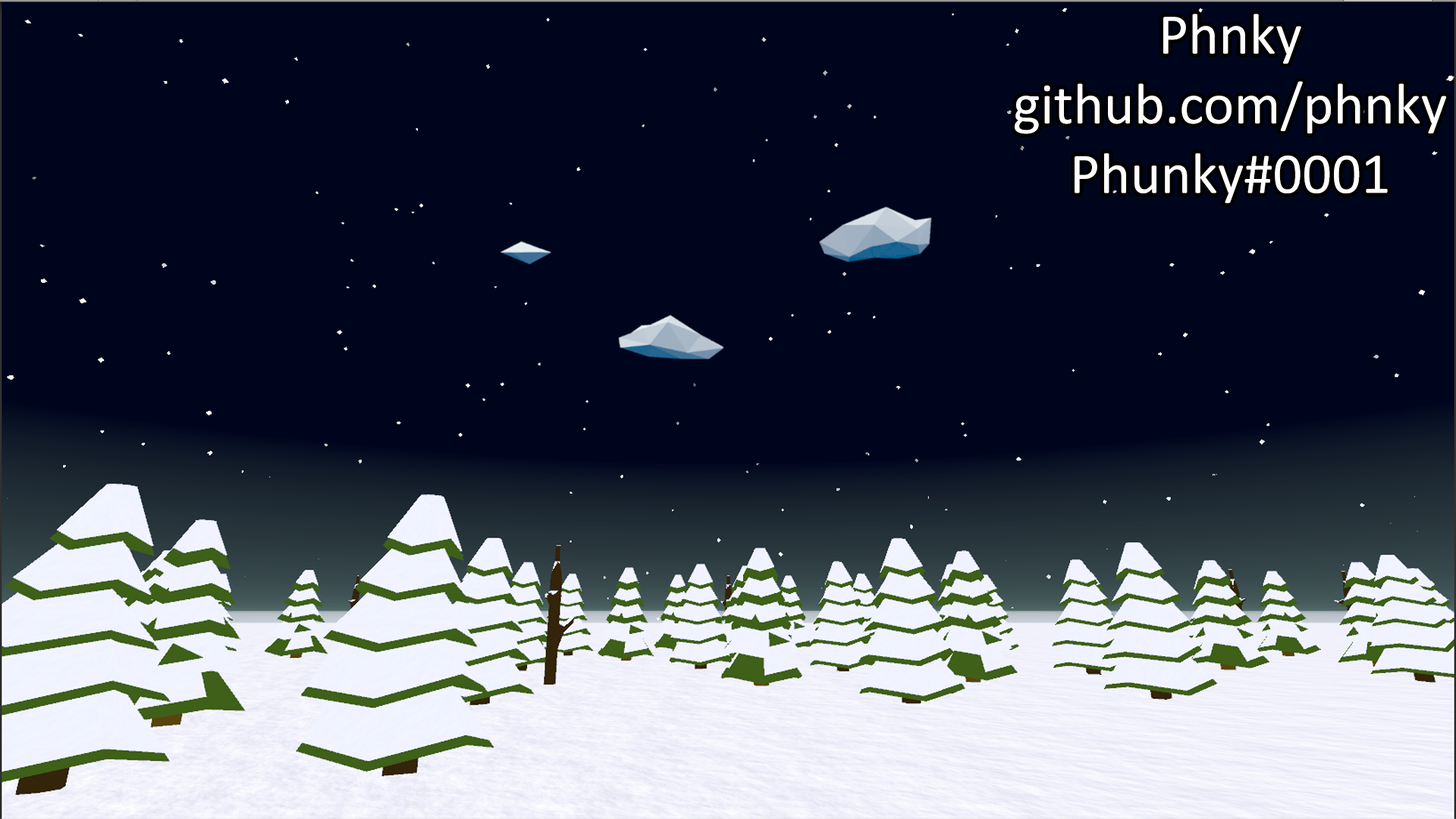
<style>
.page{position:relative;width:1456px;height:819px;background:#00051e}
.page>*{position:absolute;margin:0}
.t1{font:58.1px "Calibri";color:#ffffff}
</style>
<div class="page">
<p class="t1" style="left:1015px;top:14px;width:431px;height:189px;text-align:center">Phnky<br>github.com/phnky<br>Phunky#0001</p>
</div>
